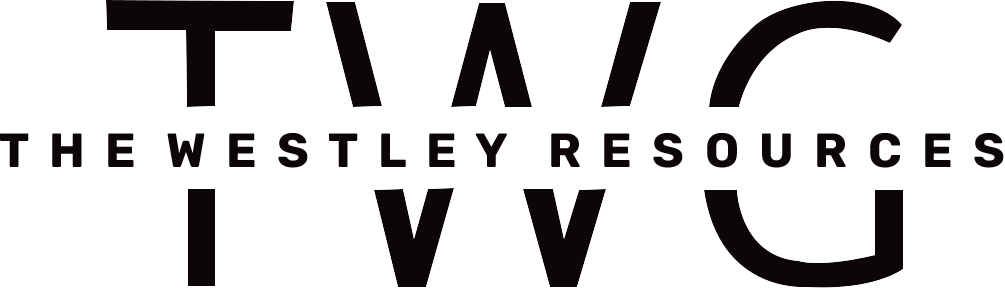
<style>
.page{position:relative;width:1005px;height:288px;background:#ffffff}
.page>*{position:absolute;margin:0}
.t1{font:48px "Rubik-Bold";color:#0c0606}
</style>
<div class="page">
<p class="t1" style="left:0px;top:133px;width:1004px;height:35px">T  H  E   W  E  S  T  L  E  Y    R  E  S  O  U  R  C  E  S</p>
</div>
